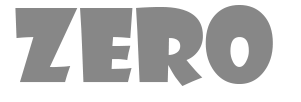
<style>
.page{position:relative;width:301px;height:102px;background:#ffffff}
.page>*{position:absolute;margin:0}
.t1{font:98.4px "ShowcardGothic-Reg";color:#878787;scale:1.03 1}
</style>
<div class="page">
<p class="t1" style="left:15px;top:5px;width:258px;height:81px">Zero</p>
</div>
